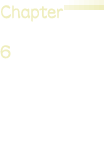
<style>
.page{position:relative;width:104px;height:160px;background:#ffffff}
.page>*{position:absolute;margin:0}
.t1{font:24.2px "DFLeiShoStd-W5";letter-spacing:-0.025em;color:#efeebe;scale:0.8 1}
.t2{font:24.2px "DFLeiShoStd-W5";letter-spacing:-0.025em;color:#efeebe;scale:0.83 1}
</style>
<div class="page">
<p class="t1" style="left:1px;top:5px;width:62px;height:17px">Chapter</p>
<p class="t2" style="left:0px;top:45px;width:11px;height:14px">6</p>
</div>
